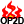
<style>
.page{position:relative;width:24px;height:24px;background:#ffffff}
.page>*{position:absolute;margin:0}
.t1{font:9px "Arial-BoldMT";color:#000000;scale:0.96 1}
</style>
<div class="page">
<p class="t1" style="left:0px;top:17px;width:24px;height:7px">OP2D</p>
</div>
